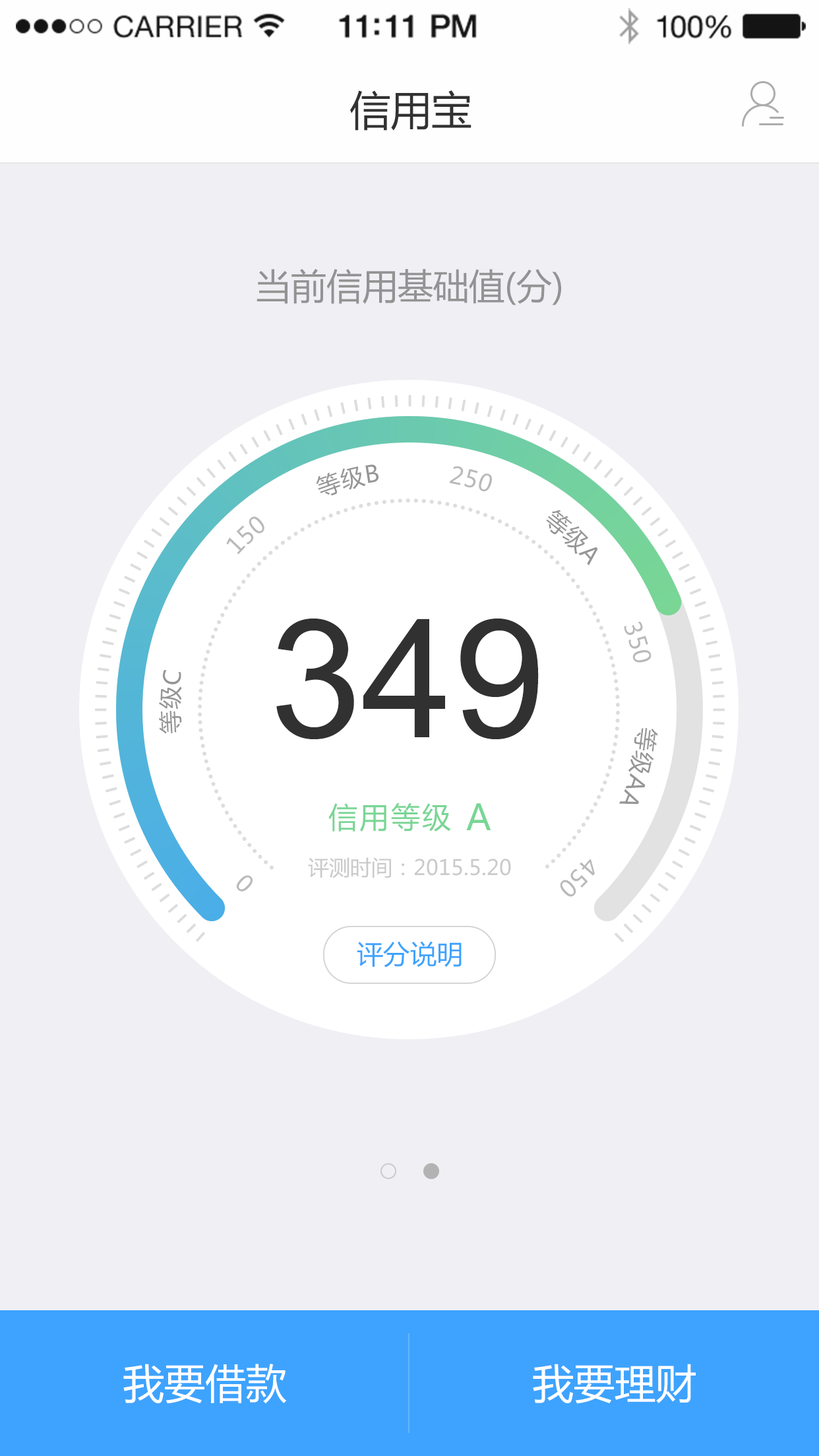
<style>
.page{position:relative;width:819px;height:1456px;background:#efeff4}
.page>*{position:absolute;margin:0}
.t1{font:40.9px "MicrosoftYaHei";color:#323232}
.t2{font:35.6px "MicrosoftYaHei";color:#939393}
.t3{font:164.9px "ArialMT";color:#313131}
.t4{font:29px "MicrosoftYaHei";letter-spacing:0.08em;color:#79d695}
.t5{font:35.6px "MicrosoftYaHei";letter-spacing:0.08em;color:#79d695}
.t6{font:21.1px "MicrosoftYaHei";color:#cacaca}
.t7{font:26.4px "MicrosoftYaHei";color:#3ea3fe}
.t8{font:40.9px "MicrosoftYaHei";color:#ffffff}
</style>
<div class="page">
<p class="t1" style="left:350px;top:90px;width:121px;height:41px">信用宝</p>
<p class="t2" style="left:257px;top:268px;width:304px;height:37px">当前信用基础值(分)</p>
<p class="t3" style="left:276px;top:618px;width:263px;height:121px">349</p>
<p class="t4" style="left:328px;top:803px;width:163px;height:29px">信用等级 <span class="t5">A</span></p>
<p class="t6" style="left:308px;top:857px;width:203px;height:21px">评测时间：2015.5.20</p>
<p class="t7" style="left:357px;top:941px;width:105px;height:26px">评分说明</p>
<p class="t8" style="left:123px;top:1364px;width:164px;height:40px">我要借款</p>
<p class="t8" style="left:533px;top:1364px;width:163px;height:40px">我要理财</p>
</div>
